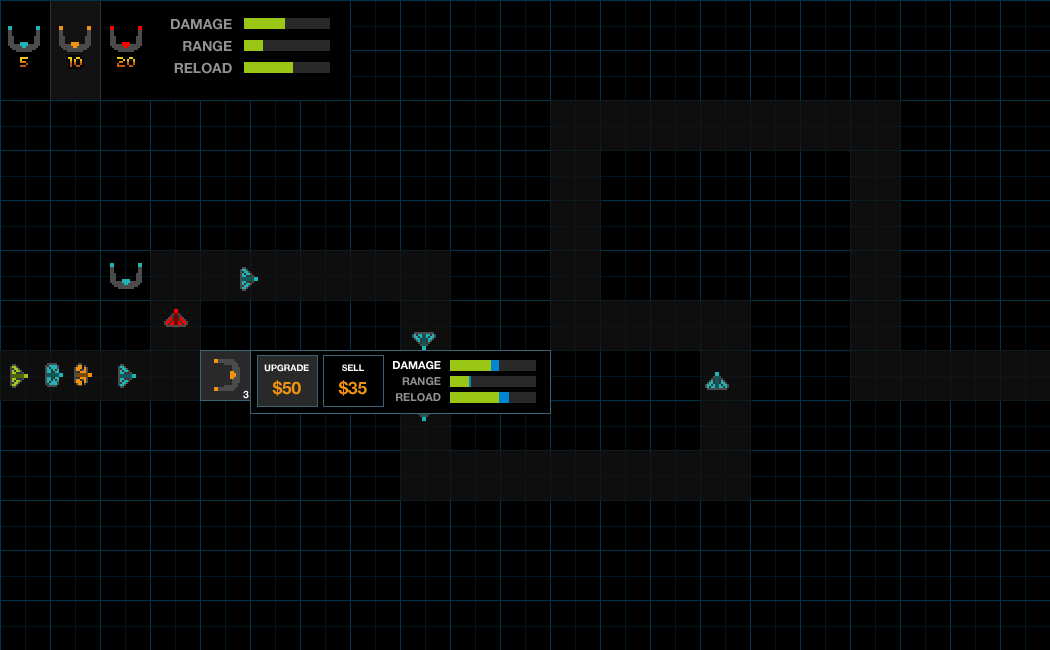
<style>
.page{position:relative;width:1050px;height:650px;background:#000000}
.page>*{position:absolute;margin:0}
.t1{font:14px/22px "HelveticaNeue-Bold";color:#919191;text-transform:uppercase}
.t2{font:16px "04b03"}
.t3{font:9px "HelveticaNeue-Bold";color:#ffffff;text-transform:uppercase}
.t4{font:11px/16px "HelveticaNeue-Bold";color:#919191;text-transform:uppercase}
.t5{font:11px/16px "HelveticaNeue-Bold";color:#ffffff;text-transform:uppercase}
.t6{font:10px "HelveticaNeue-Bold";color:#ffffff;text-transform:uppercase}
.t7{font:17px "HelveticaNeue-Bold";color:#f2930f;text-transform:uppercase}
</style>
<div class="page">
<p class="t1" style="left:171px;top:18px;width:61px;height:56px;text-align:right">damage<br>range<br>reload</p>
<p class="t2" style="left:20px;top:57px;width:8px;height:10px">5</p>
<p class="t2" style="left:68px;top:57px;width:14px;height:10px">10</p>
<p class="t2" style="left:117px;top:57px;width:18px;height:10px">20</p>
<p class="t3" style="left:264px;top:364px;width:45px;height:8px">upgrade</p>
<p class="t3" style="left:342px;top:364px;width:22px;height:7px">sell</p>
<p class="t4" style="left:393px;top:361px;width:48px;height:41px;text-align:right"><span class="t5">damage<br></span>range<br>reload</p>
<p class="t6" style="left:243px;top:390px;width:6px;height:9px">3</p>
<p class="t7" style="left:272px;top:380px;width:29px;height:16px">$50</p>
<p class="t7" style="left:338px;top:380px;width:29px;height:16px">$35</p>
</div>
